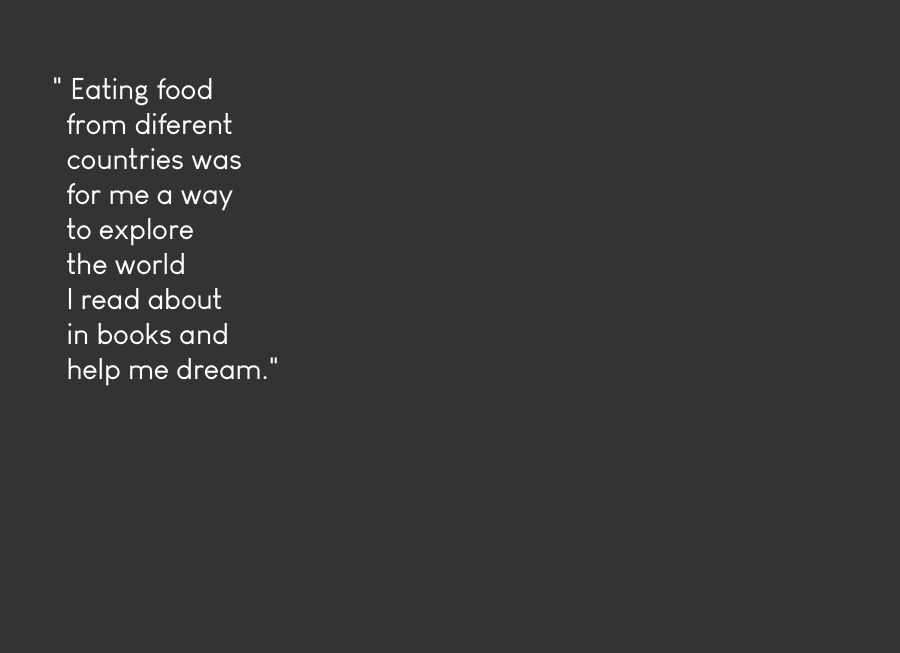
<style>
.page{position:relative;width:900px;height:653px;background:#333333}
.page>*{position:absolute;margin:0}
.t1{font:29.2px "LouisGeorgeCafe";color:#ffffff}
</style>
<div class="page">
<p class="t1" style="left:54px;top:77px;width:223px;height:309px">" Eating food <br>  from diferent <br>  countries was <br>  for me a way<br>  to explore <br>  the world <br>  I read about <br>  in books and<br>  help me dream."</p>
</div>
